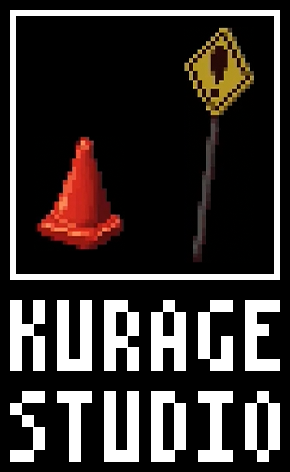
<style>
.page{position:relative;width:290px;height:472px;background:#000000}
.page>*{position:absolute;margin:0}
.t1{font:94px/94px "MisakiMincho";color:#ffffff}
</style>
<div class="page">
<p class="t1" style="left:10px;top:300px;width:270px;height:162px;text-align:center">KURAGE<br>STUDIO</p>
</div>
